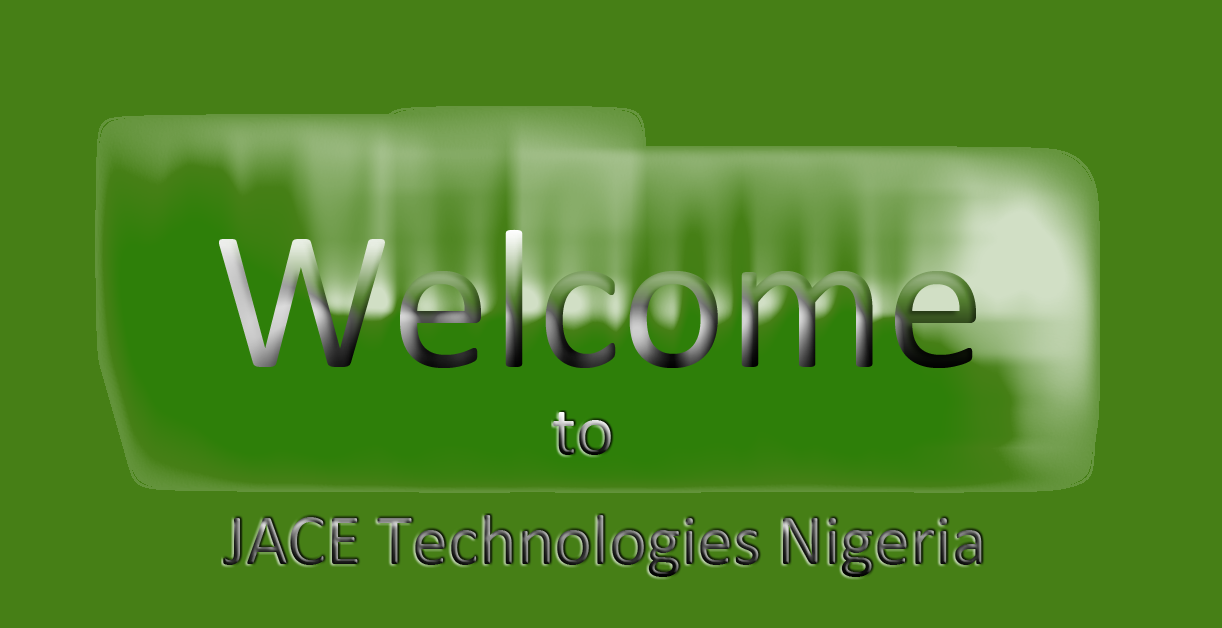
<style>
.page{position:relative;width:1222px;height:628px;background:#467f16}
.page>*{position:absolute;margin:0}
.t1{font:72px "Calibri"}
</style>
<div class="page">
<p class="t1" style="left:553px;top:412px;width:58px;height:43px">to</p>
<p class="t1" style="left:223px;top:515px;width:759px;height:62px">JACE Technologies Nigeria</p>
</div>
